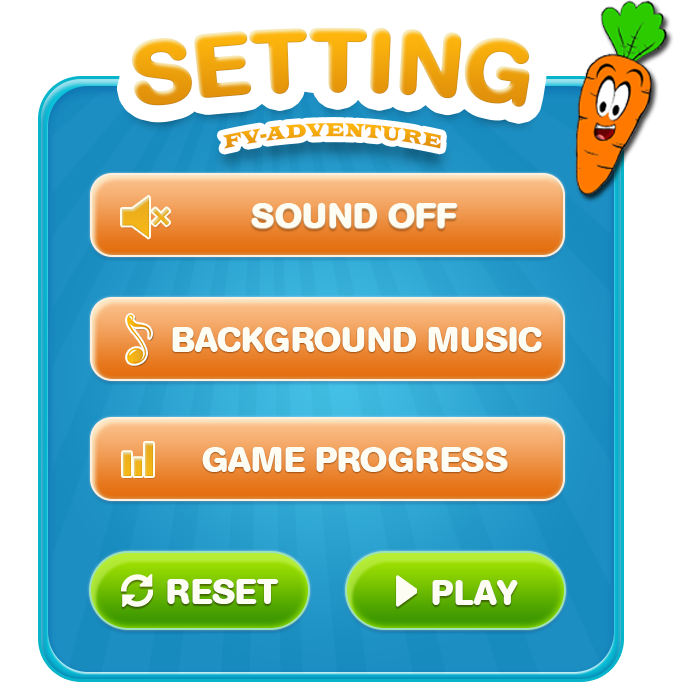
<style>
.page{position:relative;width:700px;height:700px;background:#ffffff}
.page>*{position:absolute;margin:0}
.t1{font:90px "AGBookRounded-Bold";color:#f8a900;text-transform:uppercase}
.t2{font:20.3px "LatinWide";color:#f3a80c;text-transform:uppercase;scale:0.68 1}
.t3{font:35px "AGBookRounded-Bold";color:#fdfdf3;text-transform:uppercase}
</style>
<div class="page">
<p class="t1" style="left:131px;top:27px;width:399px;height:80px">SETTING</p>
<p class="t2" style="left:222px;top:123px;width:219px;height:26px">fv-adventure</p>
<p class="t3" style="left:251px;top:203px;width:207px;height:25px">SOUND OFF</p>
<p class="t3" style="left:172px;top:327px;width:370px;height:25px">BACKGROUND MUSIC</p>
<p class="t3" style="left:202px;top:447px;width:306px;height:25px">GAME PROGRESS</p>
<p class="t3" style="left:167px;top:579px;width:112px;height:25px">RESET</p>
<p class="t3" style="left:432px;top:580px;width:86px;height:25px">PLAY</p>
</div>
